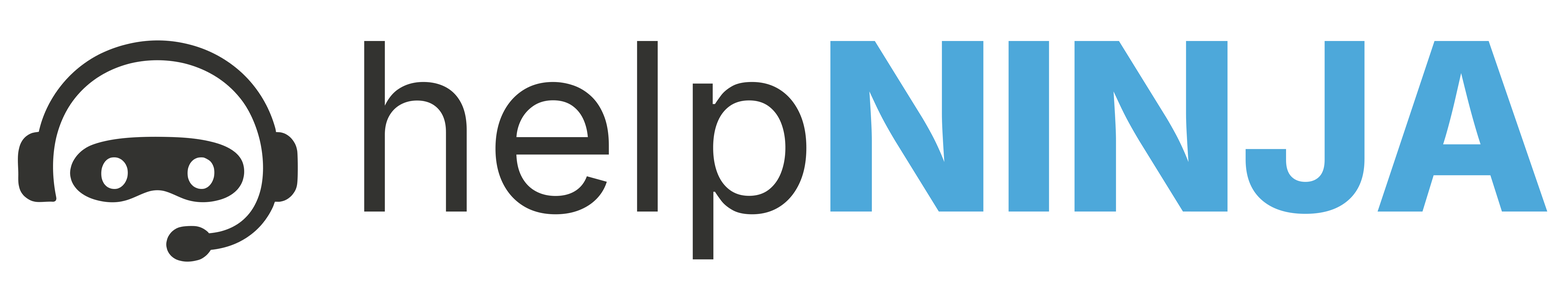
<style>
.page{position:relative;width:1568px;height:300px;background:#ffffff}
.page>*{position:absolute;margin:0}
.t1{font:234.5px "Inter-ExtraBold";letter-spacing:-0.005em;color:#4da8da}
.t2{font:234.5px "Inter-Regular";letter-spacing:-0.005em;color:#333330}
</style>
<div class="page">
<p class="t1" style="left:364px;top:41px;width:1183px;height:219px"><span class="t2">help</span>NINJA</p>
</div>
